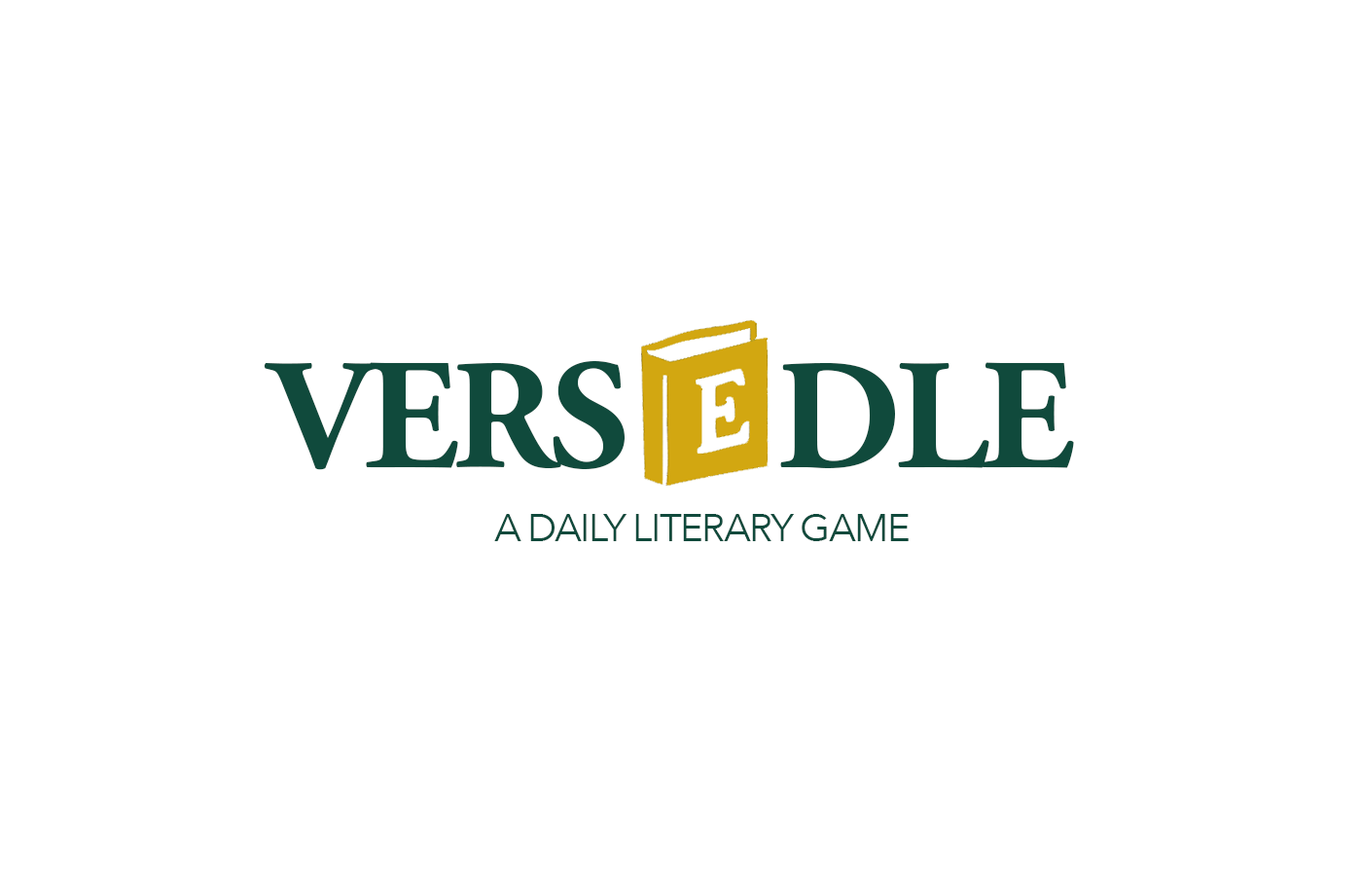
<style>
.page{position:relative;width:1362px;height:876px;background:#ffffff}
.page>*{position:absolute;margin:0}
.t1{font:157.6px "AGaramondPro-Bold";letter-spacing:-0.04em;color:#104a3c}
.t2{font:38.9px "AvenirNext-Regular";letter-spacing:-0.04em;color:#104a3c}
</style>
<div class="page">
<p class="t1" style="left:264px;top:360px;width:361px;height:110px">VERS</p>
<p class="t1" style="left:780px;top:362px;width:294px;height:106px">DLE</p>
<p class="t2" style="left:494px;top:514px;width:415px;height:27px">A DAILY LITERARY GAME</p>
</div>
